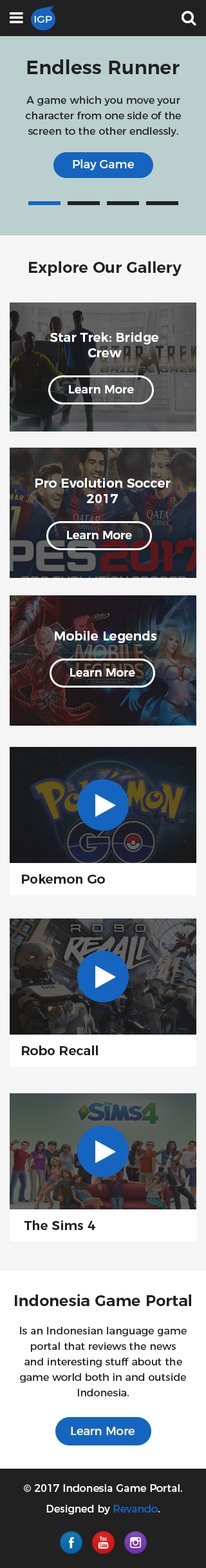
<style>
.page{position:relative;width:206px;height:1568px;background:#ffffff}
.page>*{position:absolute;margin:0}
.t1{font:19.4px "Montserrat-SemiBold";color:#212121}
.t2{font:10.3px/15.5px "Montserrat-Regular";color:#212121}
.t3{font:11.6px "Montserrat-Regular";color:#ffffff}
.t4{font:15.5px "Montserrat-SemiBold";color:#212121}
.t5{font:12.9px/15.5px "Montserrat-SemiBold";color:#ffffff}
.t6{font:11.6px "Montserrat-SemiBold";color:#ffffff}
.t7{font:12.9px "Montserrat-SemiBold";color:#ffffff}
.t8{font:12.9px "Montserrat-SemiBold";color:#212121}
.t9{font:10.3px/20.6px "Montserrat-Regular";color:#ffffff}
.t10{font:10.3px/20.6px "Montserrat-Regular";color:#1565c0}
</style>
<div class="page">
<p class="t1" style="left:27px;top:59px;width:153px;height:15px">Endless Runner</p>
<p class="t2" style="left:25px;top:96px;width:156px;height:41px;text-align:center">A game which you move your<br>character from one side of the<br>screen to the other endlessly.</p>
<p class="t3" style="left:73px;top:159px;width:61px;height:11px">Play Game</p>
<p class="t4" style="left:29px;top:261px;width:153px;height:15px">Explore Our Gallery</p>
<p class="t5" style="left:50px;top:332px;width:109px;height:25px;text-align:center">Star Trek: Bridge<br>Crew</p>
<p class="t6" style="left:69px;top:385px;width:65px;height:8px">Learn More</p>
<p class="t5" style="left:35px;top:478px;width:136px;height:25px;text-align:center">Pro Evolution Soccer<br>2017</p>
<p class="t6" style="left:67px;top:531px;width:65px;height:8px">Learn More</p>
<p class="t7" style="left:55px;top:631px;width:102px;height:12px">Mobile Legends</p>
<p class="t6" style="left:70px;top:668px;width:65px;height:9px">Learn More</p>
<p class="t8" style="left:22px;top:874px;width:83px;height:10px">Pokemon Go</p>
<p class="t8" style="left:22px;top:1046px;width:76px;height:9px">Robo Recall</p>
<p class="t8" style="left:24px;top:1220px;width:71px;height:10px">The Sims 4</p>
<p class="t4" style="left:15px;top:1294px;width:177px;height:12px">Indonesia Game Portal</p>
<p class="t2" style="left:20px;top:1327px;width:167px;height:69px;text-align:center">Is an Indonesian language game<br>portal that reviews the news<br>and interesting stuff about the<br>game world both in and outside<br>Indonesia.</p>
<p class="t3" style="left:71px;top:1427px;width:64px;height:8px">Learn More</p>
<p class="t9" style="left:24px;top:1484px;width:159px;height:30px;text-align:center">© 2017 Indonesia Game Portal.<br>Designed by <span class="t10">Revando</span>.</p>
</div>
